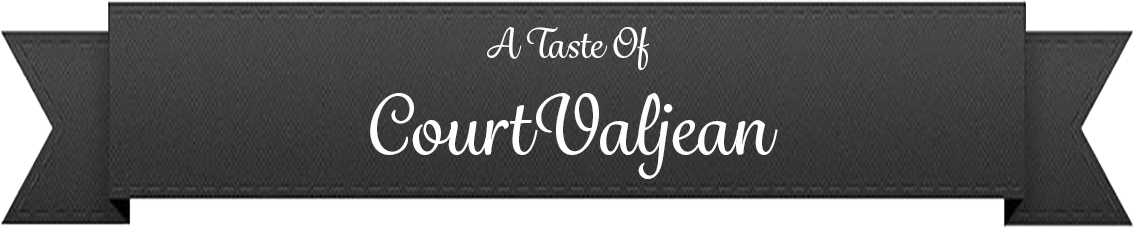
<style>
.page{position:relative;width:1134px;height:228px}
.page>*{position:absolute;margin:0}
.t1{font:80px "GrafolitaScript-Medium";color:#fefefe}
.t2{font:40px "GrafolitaScript-Medium";color:#fefefe}
</style>
<div class="page">
<p class="t1" style="left:370px;top:27px;width:408px;height:152px;text-align:center"><span class="t2">A Taste Of<br></span>CourtValjean</p>
</div>
